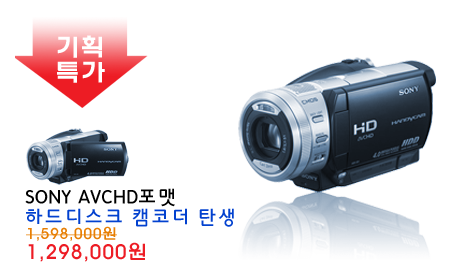
<style>
.page{position:relative;width:450px;height:280px;background:#ffffff}
.page>*{position:absolute;margin:0}
.t1{font:24.8px/25px "HYwulB";color:#ffffff}
.t2{font:20px/20.1px "HYkanB";color:#000000}
.t3{font:20px/20.1px "HYkanB";color:#0241cf}
.t4{font:15px/20.1px "HYwulM";color:#e77f04}
.t5{font:20px/20.1px "HYwulM";color:#ed1c24}
</style>
<div class="page">
<p class="t1" style="left:57px;top:35px;width:48px;height:48px">기획<br>특가</p>
<p class="t2" style="left:25px;top:188px;width:209px;height:39px">SONY AVCHD포맷<br><span class="t3">하드디스크 캠코더 탄생</span></p>
<p class="t4" style="left:26px;top:226px;width:119px;height:36px">1,598,000원<br><span class="t5">1,298,000원</span></p>
</div>
